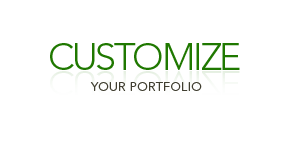
<style>
.page{position:relative;width:294px;height:141px;background:#ffffff}
.page>*{position:absolute;margin:0}
.t1{font:37.8px "Avenir-Light";letter-spacing:-0.06em;color:#1f7800}
.t2{font:12.5px "Avenir-Light";letter-spacing:0.02em;color:#403e30}
</style>
<div class="page">
<p class="t1" style="left:50px;top:43px;width:190px;height:27px">CUSTOMIZE</p>
<p class="t2" style="left:90px;top:82px;width:112px;height:9px">YOUR PORTFOLIO</p>
</div>
